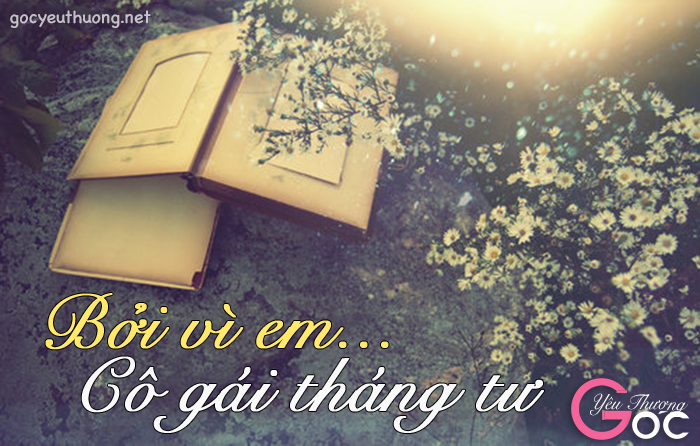
<style>
.page{position:relative;width:700px;height:446px}
.page>*{position:absolute;margin:0}
.t1{font:18px "ChalkboardSE-Regular";color:#c4c2c6}
.t2{font:75.3px "SnellRoundhand";color:#ffe86a;font-weight:bold}
.t3{font:75.3px "SnellRoundhand";color:#f9f9f9;font-weight:bold}
.t4{font:21.4px "SnellRoundhand";color:#ffffff;scale:0.92 1}
</style>
<div class="page">
<p class="t1" style="left:10px;top:10px;width:141px;height:18px">gocyeuthuong.net</p>
<p class="t2" style="left:45px;top:293px;width:344px;height:57px">Bở vì em...</p>
<p class="t2" style="left:140px;top:307px;width:30px;height:42px">i</p>
<p class="t3" style="left:81px;top:356px;width:463px;height:77px">Cô gái tháng tư</p>
<p class="t4" style="left:590px;top:393px;width:71px;height:23px">Yêu Thư</p>
<p class="t4" style="left:658px;top:401px;width:12px;height:9px">ơ</p>
<p class="t4" style="left:666px;top:402px;width:22px;height:15px">ng</p>
</div>
